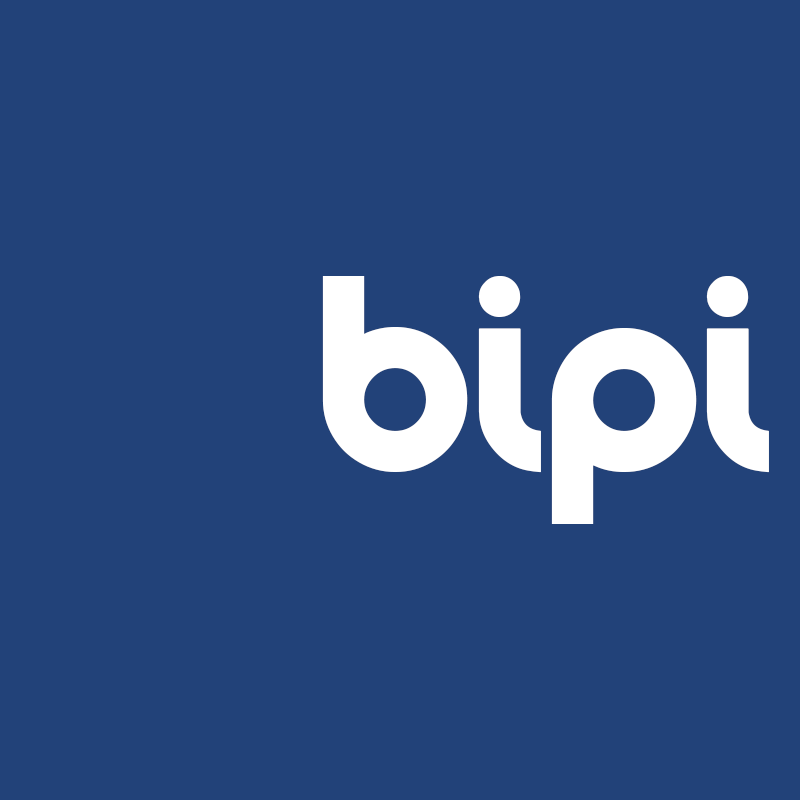
<style>
.page{position:relative;width:800px;height:800px;background:#224279}
.page>*{position:absolute;margin:0}
.t1{font:280px "AlongSansExtraBold";letter-spacing:-0.06em;color:#ffffff}
</style>
<div class="page">
<p class="t1" style="left:322px;top:276px;width:447px;height:248px">bipi</p>
</div>
